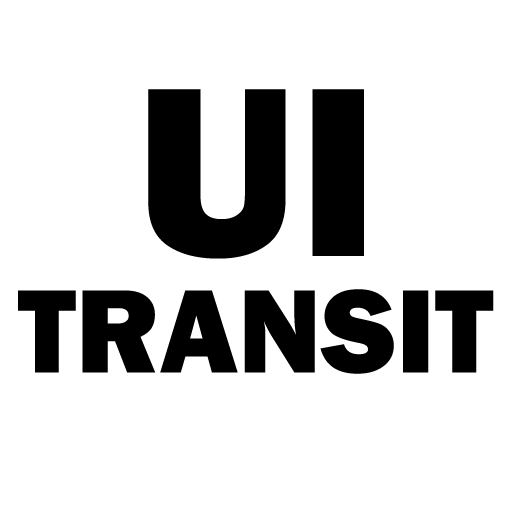
<style>
.page{position:relative;width:512px;height:512px;background:#ffffff}
.page>*{position:absolute;margin:0}
.t1{font:250px "FranklinGothic-Heavy";color:#000000}
.t2{font:122.8px "FranklinGothic-Heavy";color:#000000}
</style>
<div class="page">
<p class="t1" style="left:148px;top:89px;width:216px;height:170px">UI</p>
<p class="t2" style="left:18px;top:289px;width:476px;height:85px">TRANSIT</p>
</div>
